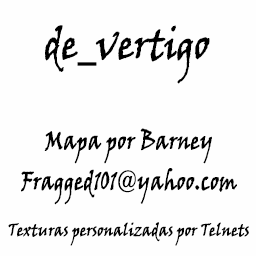
<style>
.page{position:relative;width:256px;height:256px;background:#fefefe}
.page>*{position:absolute;margin:0}
.t1{font:42.7px "VinerHandITC";letter-spacing:-0.04em;color:#000000;font-weight:bold;scale:0.87 1}
.t2{font:25.3px "VinerHandITC";letter-spacing:-0.01em;color:#000000;font-weight:bold;scale:0.8 1}
.t3{font:17.3px "VinerHandITC";letter-spacing:-0.015em;color:#000000;font-weight:bold;scale:0.84 1}
</style>
<div class="page">
<p class="t1" style="left:45px;top:25px;width:165px;height:59px">de_vertigo</p>
<p class="t2" style="left:44px;top:128px;width:168px;height:36px">Mapa por Barney</p>
<p class="t2" style="left:21px;top:168px;width:216px;height:37px">Fragged101@yahoo.com</p>
<p class="t3" style="left:8px;top:222px;width:241px;height:24px">Texturas personalizadas por Telnets</p>
</div>
